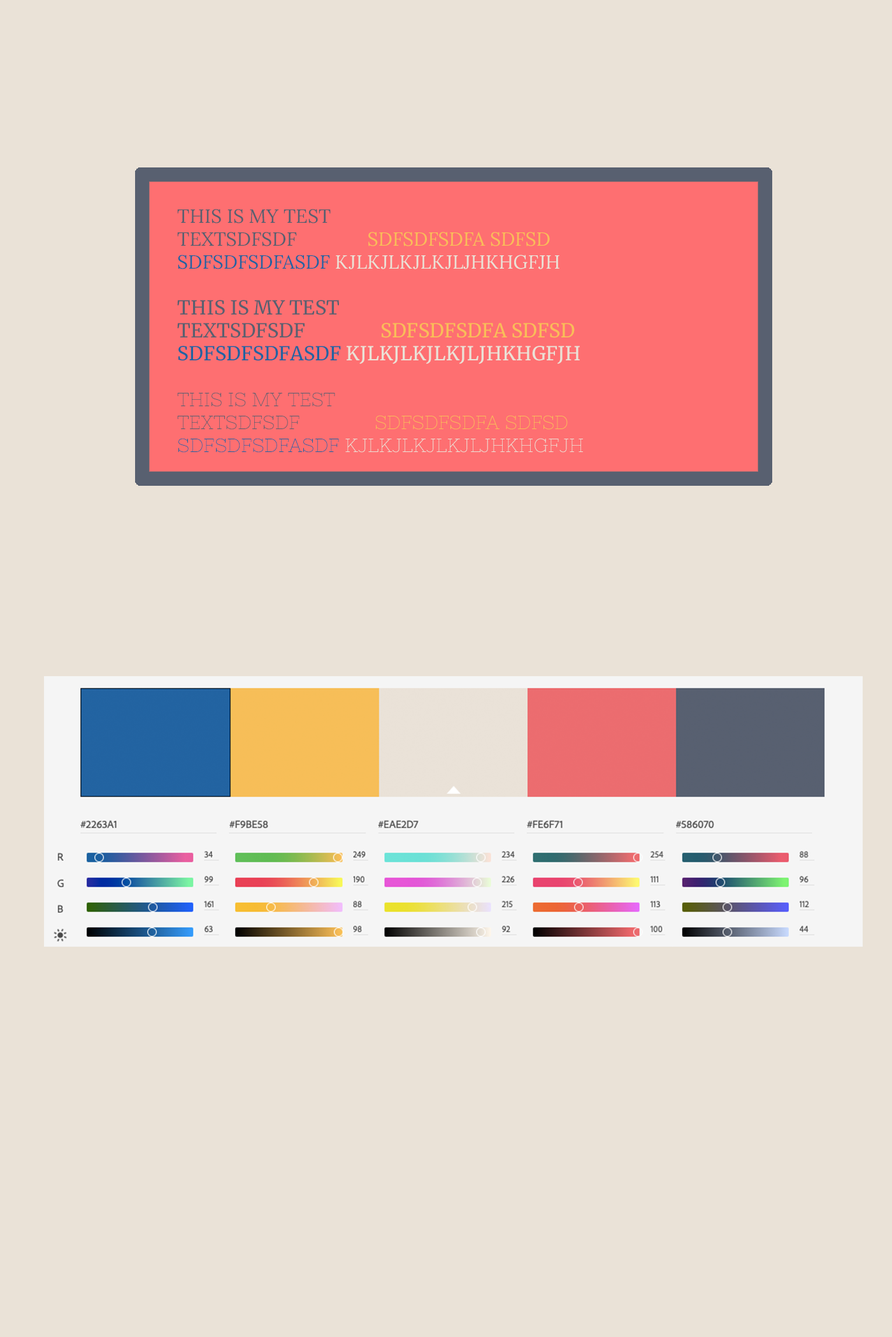
<style>
.page{position:relative;width:892px;height:1337px;background:#eae2d7}
.page>*{position:absolute;margin:0}
.t1{font:19.1px "Lora-Regular";color:#586070}
.t2{font:19.1px "Lora-Regular";color:#fe6f71}
.t3{font:19.1px "Lora-Regular";color:#f9be58}
.t4{font:19.1px "Lora-Regular";color:#2263a1}
.t5{font:19.1px "Lora-Regular";color:#eae2d7}
.t6{font:19.1px "Merriweather-Regular";color:#586070}
.t7{font:19.1px "Merriweather-Regular";color:#fe6f71}
.t8{font:19.1px "Merriweather-Regular";color:#f9be58}
.t9{font:19.1px "Merriweather-Regular";color:#2263a1}
.t10{font:19.1px "Merriweather-Regular";color:#eae2d7}
.t11{font:19.1px "NixieOne-Regular";color:#586070;text-transform:uppercase}
.t12{font:19.1px "NixieOne-Regular";color:#fe6f71;text-transform:uppercase}
.t13{font:19.1px "NixieOne-Regular";color:#f9be58;text-transform:uppercase}
.t14{font:19.1px "NixieOne-Regular";color:#2263a1;text-transform:uppercase}
.t15{font:19.1px "NixieOne-Regular";color:#eae2d7;text-transform:uppercase}
</style>
<div class="page">
<p class="t1" style="left:177px;top:209px;width:406px;height:244px">THIS IS MY TEST TEXTSDFSDF<span class="t2">SDFSDF</span><span class="t3">SDFSDFSDFA SDFSD </span><span class="t4"><br>SDFSDFSDFASDF </span><span class="t5">KJLKJLKJLKJLJHKHGFJH<br><br></span><span class="t6">THIS IS MY TEST TEXTSDFSDF</span><span class="t7">SDFSDF</span><span class="t8">SDFSDFSDFA SDFSD </span><span class="t9"><br>SDFSDFSDFASDF </span><span class="t10">KJLKJLKJLKJLJHKHGFJH<br><br></span><span class="t11">THIS IS MY TEST TEXTSDFSDF</span><span class="t12">SDFSDF</span><span class="t13">SDFSDFSDFA SDFSD </span><span class="t14"><br>SDFSDFSDFASDF </span><span class="t15">KJLKJLKJLKJLJHKHGFJH</span></p>
</div>
